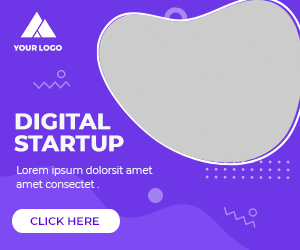
<style>
.page{position:relative;width:300px;height:250px;background:#6d37e7}
.page>*{position:absolute;margin:0}
.t1{font:7.9px "Montserrat-Bold";letter-spacing:0.025em;color:#ffffff}
.t2{font:22.1px/22.3px "Montserrat-Bold";color:#f7f7f7;font-weight:bold}
.t3{font:10px/13.5px "Montserrat-Regular";color:#f7f7f7}
.t4{font:11.3px "Montserrat-SemiBold";color:#5f04d6}
</style>
<div class="page">
<p class="t1" style="left:14px;top:45px;width:48px;height:6px">YOUR LOGO</p>
<p class="t2" style="left:14px;top:113px;width:110px;height:39px">DIGITAL<br>STARTUP</p>
<p class="t3" style="left:16px;top:166px;width:137px;height:22px;text-align:right">Lorem ipsum dolorsit amet <br>amet consectet .</p>
<p class="t4" style="left:30px;top:217px;width:69px;height:8px">CLICK HERE</p>
</div>
